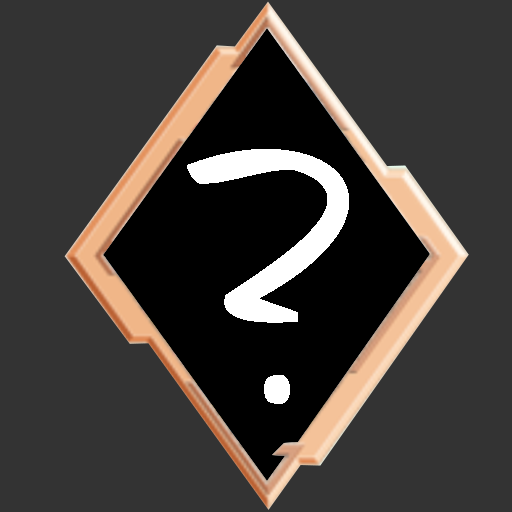
<style>
.page{position:relative;width:512px;height:512px;background:#333333}
.page>*{position:absolute;margin:0}
.t1{font:334.3px "ArchitectsDaughter";letter-spacing:0.14em;color:#ffffff;scale:0.82 1}
</style>
<div class="page">
<p class="t1" style="left:187px;top:149px;width:162px;height:286px">?</p>
</div>
